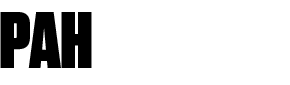
<style>
.page{position:relative;width:290px;height:85px;background:#ffffff}
.page>*{position:absolute;margin:0}
.t1{font:80px "Tungsten-Black";color:#000000}
</style>
<div class="page">
<p class="t1" style="left:0px;top:12px;width:92px;height:56px">PAH</p>
</div>
